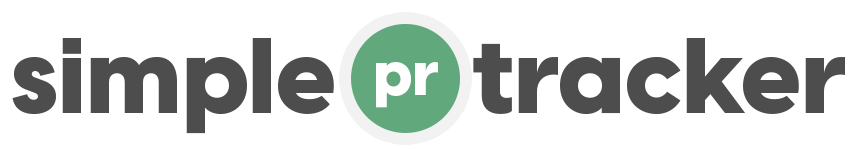
<style>
.page{position:relative;width:860px;height:149px;background:#ffffff}
.page>*{position:absolute;margin:0}
.t1{font:106px "VisbyCF-Heavy";color:#4d4d4d}
.t2{font:106px "VisbyCF-Heavy";letter-spacing:0.28em;color:#4d4d4d}
.t3{font:62.3px "VisbyCF-Heavy";color:#ffffff}
</style>
<div class="page">
<p class="t1" style="left:12px;top:38px;width:833px;height:96px">simpl<span class="t2">e     </span>tracker</p>
<p class="t3" style="left:376px;top:62px;width:62px;height:46px">pr</p>
</div>
